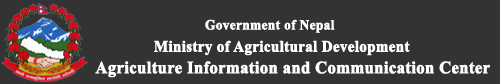
<style>
.page{position:relative;width:500px;height:84px;background:#333333}
.page>*{position:absolute;margin:0}
.t1{font:14px "TimesNewRomanPS-BoldMT";color:#ffffff;font-weight:bold;scale:0.95 1}
.t2{font:15.6px "TimesNewRomanPS-BoldMT";color:#ffffff;font-weight:bold;scale:0.95 1}
.t3{font:17.3px "TimesNewRomanPS-BoldMT";color:#ffffff;font-weight:bold;scale:0.95 1}
</style>
<div class="page">
<p class="t1" style="left:205px;top:19px;width:130px;height:14px;text-align:right">Government of Nepal<br>Ministry of Agricultural Development</p>
<p class="t2" style="left:154px;top:40px;width:256px;height:16px">Ministry of Agricultural Development</p>
<p class="t3" style="left:95px;top:61px;width:395px;height:17px">Agriculture Information and Communication Center</p>
</div>
